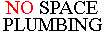
<style>
.page{position:relative;width:104px;height:32px;background:#ffffff}
.page>*{position:absolute;margin:0}
.t1{font:20px/11px "TimesNewRomanPSMT";color:#000000}
.t2{font:20px/11px "TimesNewRomanPSMT";color:#ff0000}
</style>
<div class="page">
<p class="t1" style="left:3px;top:1px;width:99px;height:30px;text-align:center"><span class="t2">NO</span> SPACE<br><br>PLUMBING</p>
</div>
